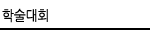
<style>
.page{position:relative;width:150px;height:30px;background:#ffffff}
.page>*{position:absolute;margin:0}
.t1{font:14px "NanumGothic";color:#000000;scale:0.9 1}
</style>
<div class="page">
<p class="t1" style="left:2px;top:8px;width:46px;height:15px">학술대회</p>
</div>
